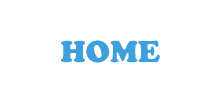
<style>
.page{position:relative;width:220px;height:100px;background:#ffffff}
.page>*{position:absolute;margin:0}
.t1{font:30px "CooperBlackStd";color:#3e9fdd}
</style>
<div class="page">
<p class="t1" style="left:60px;top:40px;width:100px;height:23px">HOME</p>
</div>
